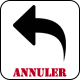
<style>
.page{position:relative;width:80px;height:80px;background:#ffffff}
.page>*{position:absolute;margin:0}
.t1{font:12px "Stencil";color:#bd0022}
</style>
<div class="page">
<p class="t1" style="left:13px;top:68px;width:54px;height:9px">ANNULER</p>
</div>
